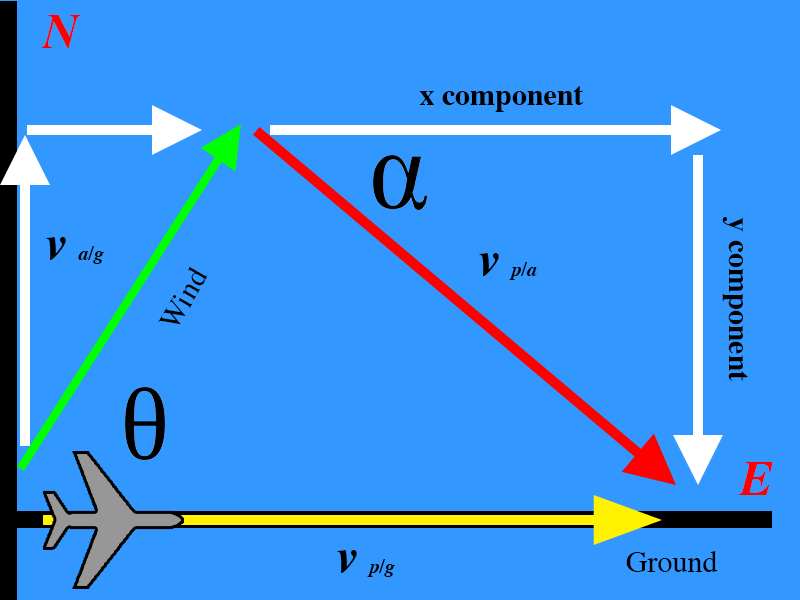
<style>
.page{position:relative;width:800px;height:600px;background:#3297ff}
.page>*{position:absolute;margin:0}
.t1{font:50px "Times-BoldItalic";color:#ff0000}
.t2{font:30px "Times-Bold";color:#000000}
.t3{font:20px "Times-BoldItalic";color:#000000}
.t4{font:50px "Times-BoldItalic";color:#000000}
.t5{font:30px "Times-Roman";color:#000000}
</style>
<div class="page">
<p class="t1" style="left:41px;top:15px;width:40px;height:33px">N</p>
<p class="t2" style="left:419px;top:86px;width:165px;height:26px">x component</p>
<p class="t2" style="left:722px;top:217px;width:26px;height:164px;rotate:90deg">y component</p>
<p class="t3" style="left:46px;top:237px;width:58px;height:27px"><span class="t4">v </span>a/g</p>
<p class="t3" style="left:479px;top:253px;width:58px;height:27px"><span class="t4">v </span>p/a</p>
<p class="t5" style="left:158px;top:266px;width:50px;height:59px;rotate:-60deg">Wind</p>
<p class="t1" style="left:738px;top:462px;width:35px;height:33px">E</p>
<p class="t3" style="left:337px;top:550px;width:58px;height:27px"><span class="t4">v </span>p/g</p>
<p class="t5" style="left:626px;top:551px;width:92px;height:21px">Ground</p>
</div>
